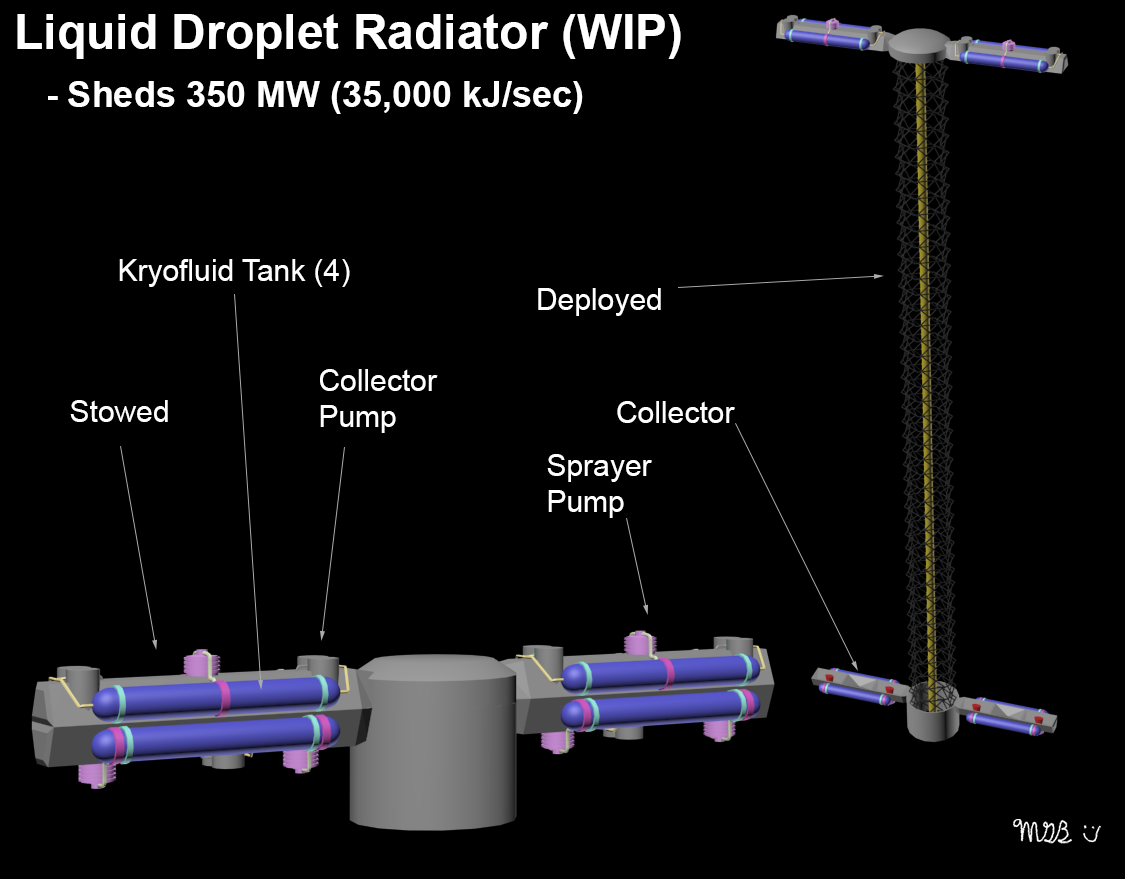
<style>
.page{position:relative;width:1125px;height:879px;background:#000000}
.page>*{position:absolute;margin:0}
.t1{font:48px "Arial-BoldMT";color:#ffffff}
.t2{font:36px "Arial-BoldMT";color:#ffffff}
.t3{font:30px "ArialMT";color:#ffffff}
</style>
<div class="page">
<p class="t1" style="left:17px;top:14px;width:664px;height:45px">Liquid Droplet Radiator (WIP)</p>
<p class="t2" style="left:48px;top:81px;width:535px;height:33px">- Sheds 350 MW (35,000 kJ/sec)</p>
<p class="t3" style="left:119px;top:259px;width:231px;height:28px">Kryofluid Tank (4)</p>
<p class="t3" style="left:538px;top:288px;width:123px;height:28px">Deployed</p>
<p class="t3" style="left:320px;top:369px;width:118px;height:64px">Collector<br>Pump</p>
<p class="t3" style="left:70px;top:400px;width:98px;height:22px">Stowed</p>
<p class="t3" style="left:617px;top:401px;width:118px;height:22px">Collector</p>
<p class="t3" style="left:547px;top:454px;width:105px;height:64px">Sprayer<br>Pump</p>
</div>
